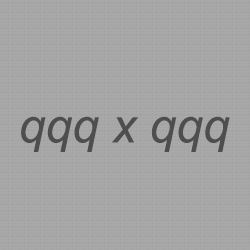
<style>
.page{position:relative;width:250px;height:250px;background:#a7a7a7}
.page>*{position:absolute;margin:0}
.t1{font:48px "Arial-ItalicMT";color:#4e4e4e}
</style>
<div class="page">
<p class="t1" style="left:21px;top:116px;width:209px;height:36px">qqq x qqq</p>
</div>
